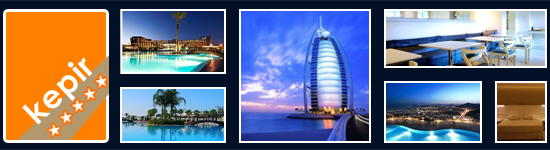
<style>
.page{position:relative;width:550px;height:150px;background:#041025}
.page>*{position:absolute;margin:0}
.t1{font:32.2px "CenturyGothic-Bold";letter-spacing:0.025em;color:#ffffff}
</style>
<div class="page">
<p class="t1" style="left:22px;top:57px;width:71px;height:68px;rotate:-43deg">kepir</p>
</div>
